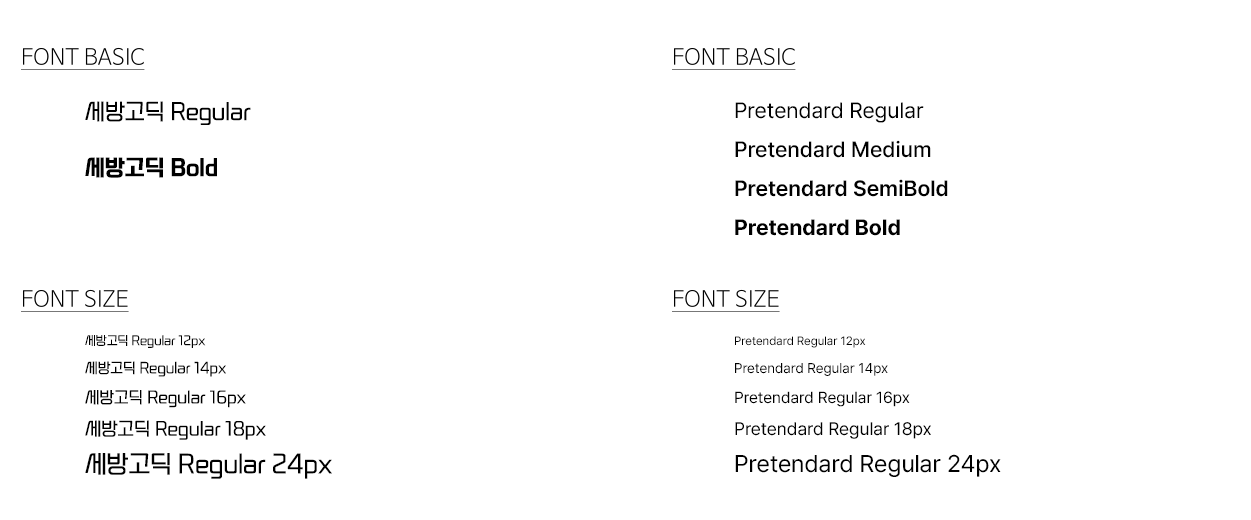
<style>
.page{position:relative;width:1251px;height:520px;background:#ffffff}
.page>*{position:absolute;margin:0}
.t1{font:22px "SEBANGGothic";color:#000000}
.t2{font:22px "Pretendard-Regular";color:#000000}
.t3{font:22px "Pretendard-Medium";color:#000000}
.t4{font:22px "SEBANGGothicBold";color:#000000}
.t5{font:22px "Pretendard-SemiBold";color:#000000}
.t6{font:22px "Pretendard-Bold";color:#000000}
.t7{font:12px "SEBANGGothic";color:#000000}
.t8{font:12px "Pretendard-Regular";color:#000000}
.t9{font:14px "SEBANGGothic";color:#000000}
.t10{font:14px "Pretendard-Regular";color:#000000}
.t11{font:16px "SEBANGGothic";color:#000000}
.t12{font:16px "Pretendard-Regular";color:#000000}
.t13{font:18px "SEBANGGothic";color:#000000}
.t14{font:18px "Pretendard-Regular";color:#000000}
.t15{font:24px "SEBANGGothic";color:#000000}
.t16{font:24px "Pretendard-Regular";color:#000000}
</style>
<div class="page">
<p class="t1" style="left:85px;top:101px;width:166px;height:24px">세방고딕 Regular</p>
<p class="t2" style="left:735px;top:102px;width:189px;height:21px">Pretendard Regular</p>
<p class="t3" style="left:735px;top:140px;width:196px;height:18px">Pretendard Medium</p>
<p class="t4" style="left:85px;top:157px;width:132px;height:21px">세방고딕 Bold</p>
<p class="t5" style="left:735px;top:179px;width:213px;height:18px">Pretendard SemiBold</p>
<p class="t6" style="left:735px;top:219px;width:165px;height:17px">Pretendard Bold</p>
<p class="t7" style="left:85px;top:335px;width:121px;height:13px">세방고딕 Regular 12px</p>
<p class="t8" style="left:735px;top:336px;width:131px;height:12px">Pretendard Regular 12px</p>
<p class="t9" style="left:85px;top:361px;width:141px;height:16px">세방고딕 Regular 14px</p>
<p class="t10" style="left:735px;top:363px;width:153px;height:13px">Pretendard Regular 14px</p>
<p class="t11" style="left:85px;top:390px;width:161px;height:18px">세방고딕 Regular 16px</p>
<p class="t12" style="left:735px;top:391px;width:175px;height:16px">Pretendard Regular 16px</p>
<p class="t13" style="left:85px;top:420px;width:181px;height:20px">세방고딕 Regular 18px</p>
<p class="t14" style="left:735px;top:422px;width:196px;height:17px">Pretendard Regular 18px</p>
<p class="t15" style="left:85px;top:453px;width:247px;height:26px">세방고딕 Regular 24px</p>
<p class="t16" style="left:735px;top:454px;width:266px;height:23px">Pretendard Regular 24px</p>
</div>
